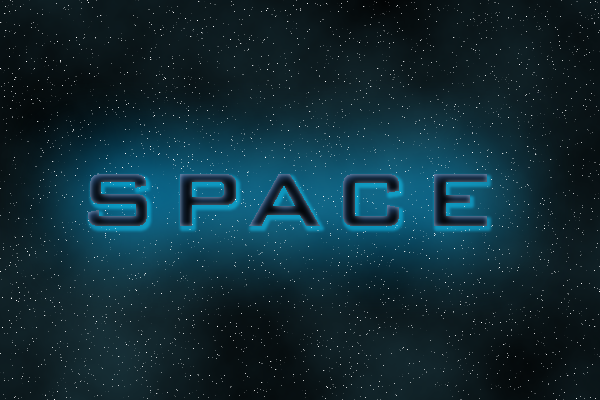
<style>
.page{position:relative;width:600px;height:400px}
.page>*{position:absolute;margin:0}
.t1{font:100px "BankGothicBT-Medium";letter-spacing:0.1em;font-variant:small-caps}
</style>
<div class="page">
<p class="t1" style="left:88px;top:174px;width:399px;height:52px">SPACE</p>
</div>
